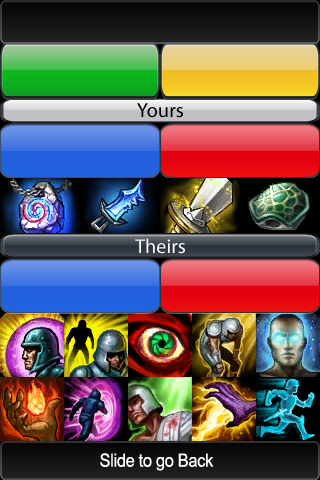
<style>
.page{position:relative;width:320px;height:480px}
.page>*{position:absolute;margin:0}
.t1{font:20.3px "MyriadPro-Regular";letter-spacing:0.005em;color:#000000}
.t2{font:20px "MyriadPro-Regular";letter-spacing:0.005em;color:#ffffff}
.t3{font:18.2px "ArialUnicodeMS";letter-spacing:-0.02em;color:#ffffff;scale:0.9 1}
</style>
<div class="page">
<p class="t1" style="left:137px;top:103px;width:46px;height:15px">Yours</p>
<p class="t2" style="left:135px;top:238px;width:50px;height:16px">Theirs</p>
<p class="t3" style="left:100px;top:453px;width:114px;height:18px">Slide to go Back</p>
</div>
